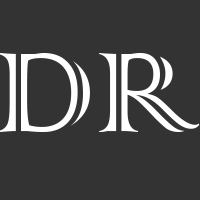
<style>
.page{position:relative;width:200px;height:200px;background:#333333}
.page>*{position:absolute;margin:0}
.t1{font:150px "ColonnaMT";color:#ffffff}
</style>
<div class="page">
<p class="t1" style="left:0px;top:53px;width:200px;height:79px">DR</p>
</div>
